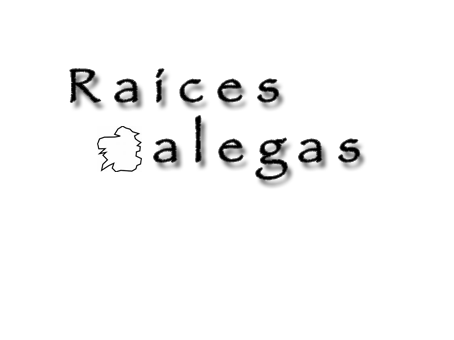
<style>
.page{position:relative;width:454px;height:340px;background:#ffffff}
.page>*{position:absolute;margin:0}
.t1{font:48px "Papyrus";letter-spacing:0.3em;color:#000000}
</style>
<div class="page">
<p class="t1" style="left:70px;top:69px;width:209px;height:33px">Raíces</p>
<p class="t1" style="left:154px;top:116px;width:206px;height:64px">alegas</p>
</div>
